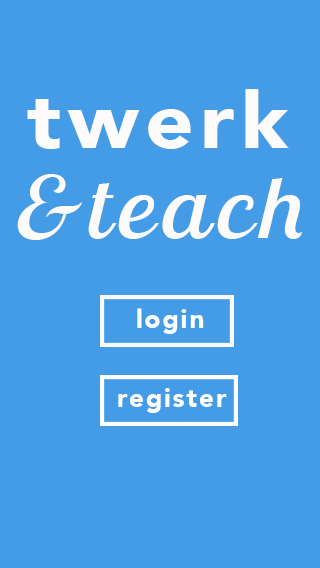
<style>
.page{position:relative;width:320px;height:568px;background:#449ce7}
.page>*{position:absolute;margin:0}
.t1{font:78.3px "Avenir-Black";letter-spacing:0.075em;color:#fdfbfb;scale:1.09 1}
.t2{font:85.2px "LobsterTwo-Italic";letter-spacing:0.075em;color:#fdfbfb;scale:1.15 1}
.t3{font:25.8px "Avenir-Black";letter-spacing:0.075em;color:#feffff}
</style>
<div class="page">
<p class="t1" style="left:27px;top:89px;width:262px;height:60px">twerk</p>
<p class="t2" style="left:17px;top:174px;width:285px;height:66px">&amp;teach</p>
<p class="t3" style="left:137px;top:308px;width:67px;height:26px">login</p>
<p class="t3" style="left:118px;top:388px;width:109px;height:25px">register</p>
</div>
